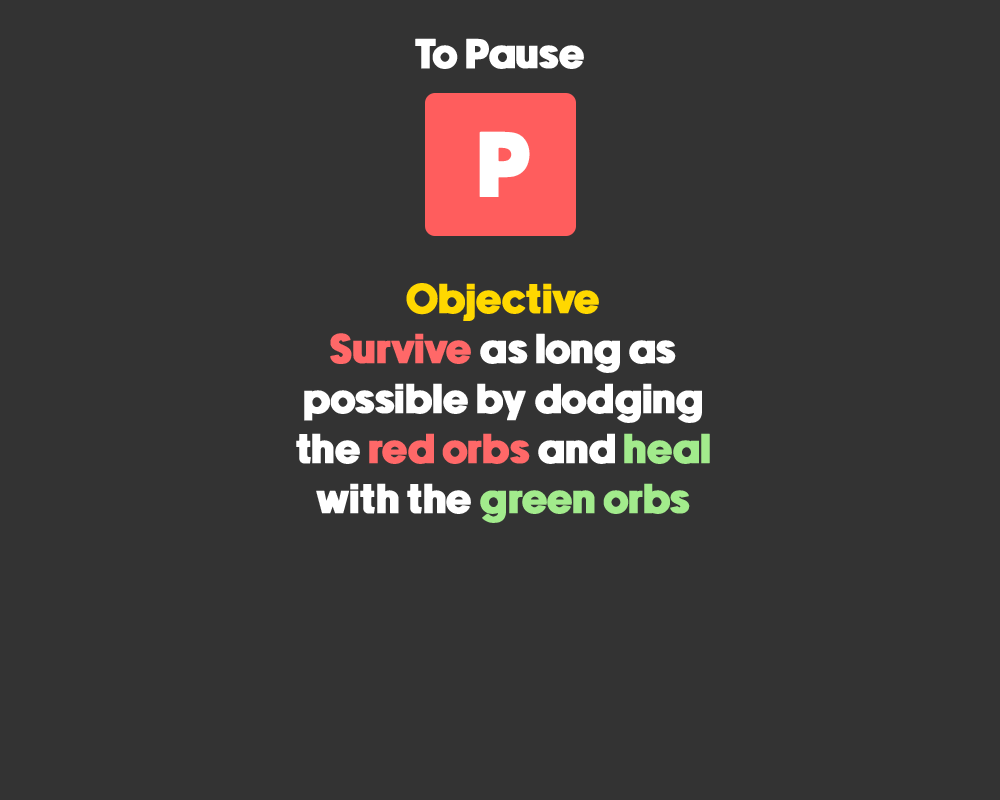
<style>
.page{position:relative;width:1000px;height:800px;background:#333333}
.page>*{position:absolute;margin:0}
.t1{font:41.7px "NewakeDemo";color:#ffffff;font-weight:bold}
.t2{font:91.7px "NewakeDemo";color:#ffffff;font-weight:bold}
.t3{font:41.7px "NewakeDemo";color:#ffd800;font-weight:bold}
.t4{font:41.7px "NewakeDemo";color:#ff6868;font-weight:bold}
.t5{font:41.7px "NewakeDemo";color:#a2eb8c;font-weight:bold}
</style>
<div class="page">
<p class="t1" style="left:415px;top:38px;width:169px;height:31px;text-align:center">To Pause<br>a</p>
<p class="t2" style="left:479px;top:131px;width:51px;height:66px">P</p>
<p class="t1" style="left:296px;top:283px;width:414px;height:240px;text-align:center"><span class="t3">Objective<br></span><span class="t4">Survive</span> as long as possible by dodging<br>the <span class="t4">red orbs</span> and <span class="t5">heal </span>with the <span class="t5">green orbs<br><br></span>a</p>
</div>
